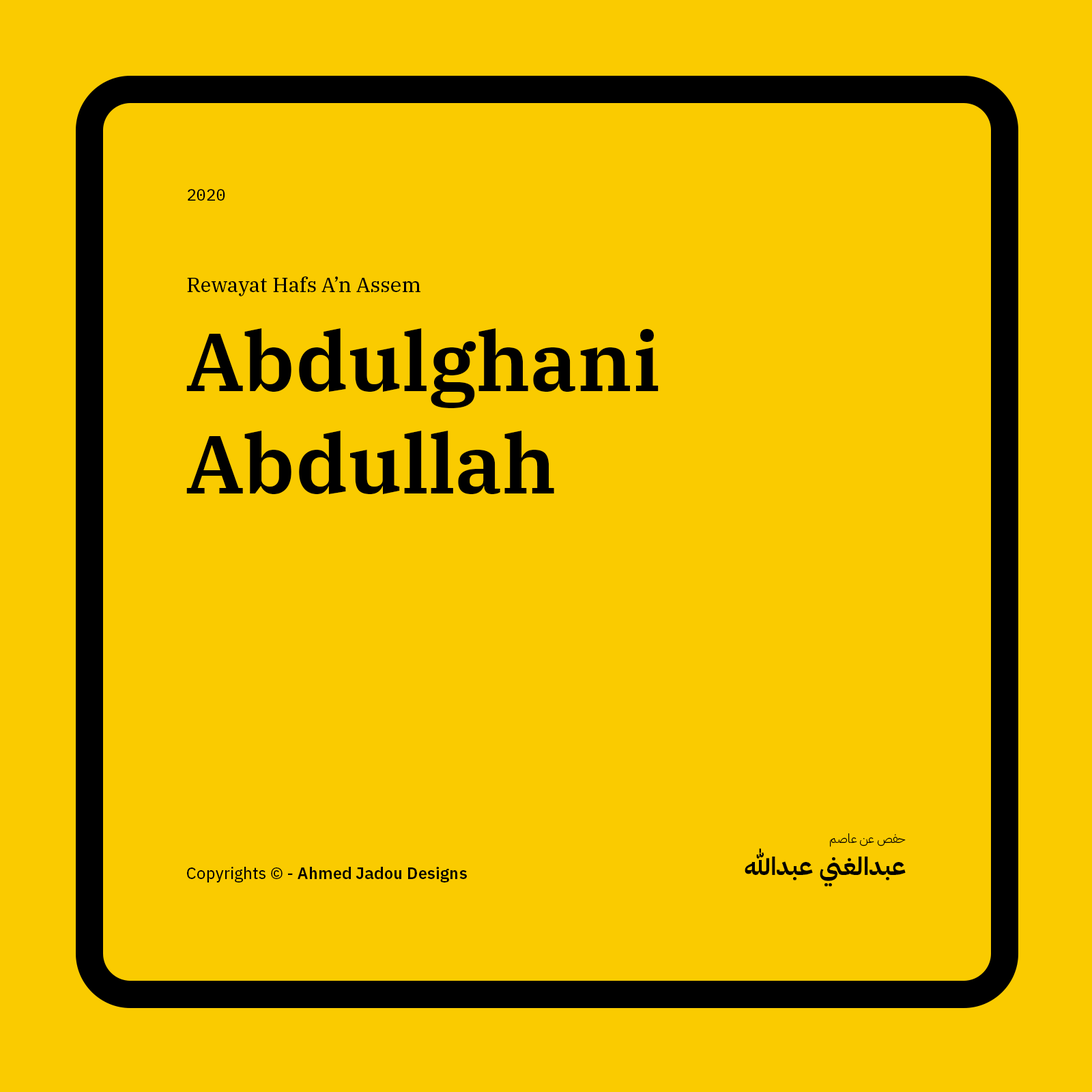
<style>
.page{position:relative;width:1092px;height:1092px;background:#facb00}
.page>*{position:absolute;margin:0}
.t1{font:16.4px "IBMPlexMono-Text";color:#000000}
.t2{font:20.5px "IBMPlexSerif-Text";color:#000000}
.t3{font:81.9px/102.7px "IBMPlexSerif-SemiBold";color:#000000}
.t4{font:12.3px "IBMPlexArabic-Light";color:#000000}
.t5{font:24.6px "IBMPlexArabic-Bold";color:#000000}
.t6{font:16.4px "IBMPlexSans-SemiBold";color:#000000}
.t7{font:16.4px "IBMPlexSans-Text";color:#000000}
</style>
<div class="page">
<p class="t1" style="left:188px;top:189px;width:37px;height:12px">2020</p>
<p class="t2" style="left:187px;top:276px;width:233px;height:20px">Rewayat Hafs A’n Assem</p>
<p class="t3" style="left:186px;top:328px;width:473px;height:166px">Abdulghani Abdullah</p>
<p class="t4" style="left:830px;top:833px;width:76px;height:14px">حفص عن عاصم</p>
<p class="t5" style="left:745px;top:848px;width:161px;height:39px">عبدالغني عبدالله</p>
<p class="t6" style="left:187px;top:867px;width:280px;height:15px"><span class="t7">Copyrights © - </span>Ahmed Jadou Designs</p>
</div>
